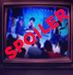
<style>
.page{position:relative;width:73px;height:75px}
.page>*{position:absolute;margin:0}
.t1{font:16.1px "Montserrat-Bold";color:#f90634;font-weight:bold}
</style>
<div class="page">
<p class="t1" style="left:5px;top:9px;width:64px;height:50px;rotate:-36deg">SPOILER</p>
</div>
